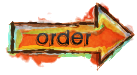
<style>
.page{position:relative;width:137px;height:75px;background:#ffffff}
.page>*{position:absolute;margin:0}
.t1{font:35px "Greenpiloww";color:#282a2c}
</style>
<div class="page">
<p class="t1" style="left:35px;top:29px;width:56px;height:18px">order</p>
</div>
